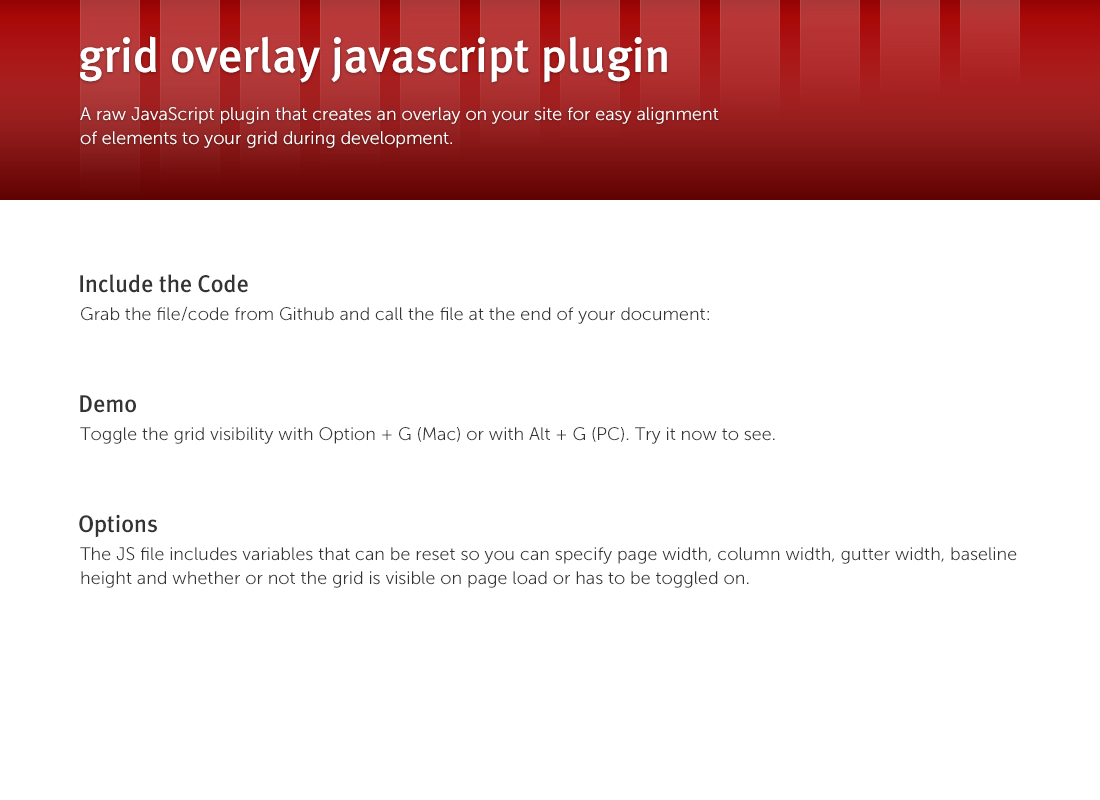
<style>
.page{position:relative;width:1100px;height:800px;background:#ffffff}
.page>*{position:absolute;margin:0}
.t1{font:48px "MetaPlusMedium-Roman";color:#ffffff}
.t2{font:18px/24px "MuseoSans-300";color:#ffffff}
.t3{font:24px "MetaPlusMedium-Roman";color:#343434}
.t4{font:18px "MuseoSans-300";color:#343434}
.t5{font:18px/24px "MuseoSans-300";color:#343434}
</style>
<div class="page">
<p class="t1" style="left:80px;top:36px;width:587px;height:47px">grid overlay javascript plugin</p>
<p class="t2" style="left:80px;top:107px;width:639px;height:41px">A raw JavaScript plugin that creates an overlay on your site for easy alignment <br>of elements to your grid during development.</p>
<p class="t3" style="left:80px;top:274px;width:168px;height:19px">Include the Code</p>
<p class="t4" style="left:81px;top:306px;width:628px;height:18px">Grab the file/code from Github and call the file at the end of your document:</p>
<p class="t3" style="left:80px;top:395px;width:56px;height:18px">Demo</p>
<p class="t4" style="left:80px;top:427px;width:695px;height:17px">Toggle the grid visibility with Option + G (Mac) or with Alt + G (PC). Try it now to see.</p>
<p class="t3" style="left:79px;top:514px;width:78px;height:24px">Options</p>
<p class="t5" style="left:80px;top:547px;width:937px;height:41px">The JS file includes variables that can be reset so you can specify page width, column width, gutter width, baseline<br>height and whether or not the grid is visible on page load or has to be toggled on.</p>
</div>
